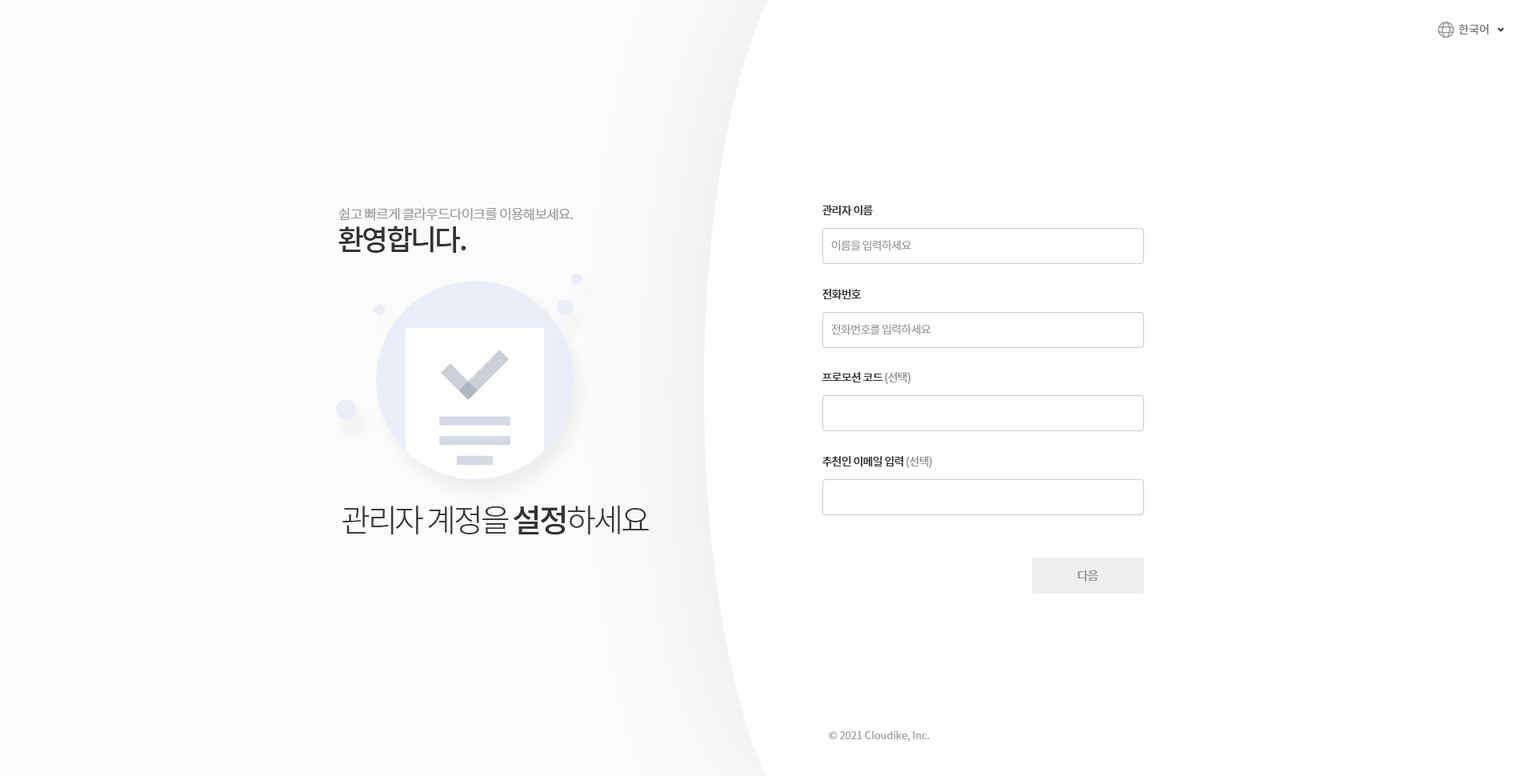
<style>
.page{position:relative;width:1536px;height:776px;background:#ffffff}
.page>*{position:absolute;margin:0}
.t1{font:11.2px "NotoSansCJKkr-DemiLight";color:#666666}
.t2{font:13.6px "NotoSansCJKkr-DemiLight";letter-spacing:-0.05em;color:#999999}
.t3{font:11.2px "NotoSansCJKkr-Medium";letter-spacing:-0.05em;color:#333333}
.t4{font:28.8px "NotoSansCJKkr-Medium";letter-spacing:-0.075em;color:#333333}
.t5{font:11.2px "NotoSansCJKkr-DemiLight";letter-spacing:-0.05em;color:#999999}
.t6{font:11.2px "NotoSansCJKkr-Medium";letter-spacing:-0.05em;color:#999999}
.t7{font:32px "NotoSansCJKkr-Light";letter-spacing:-0.075em;color:#333333}
.t8{font:32px "NotoSansCJKkr-Medium";letter-spacing:-0.075em;color:#333333}
.t9{font:12px "NotoSansCJKkr-Medium";letter-spacing:-0.05em;color:#999999}
.t10{font:10.4px "NotoSansCJKkr-DemiLight";color:#999999}
</style>
<div class="page">
<p class="t1" style="left:1459px;top:24px;width:30px;height:11px">한국어</p>
<p class="t2" style="left:338px;top:207px;width:236px;height:14px">쉽고 빠르게 클라우드다이크를 이용해보세요.</p>
<p class="t3" style="left:823px;top:205px;width:50px;height:11px">관리자 이름</p>
<p class="t4" style="left:338px;top:226px;width:128px;height:27px">환영합니다.</p>
<p class="t5" style="left:831px;top:240px;width:80px;height:11px">이름을 입력하세요</p>
<p class="t3" style="left:823px;top:289px;width:39px;height:11px">전화번호</p>
<p class="t5" style="left:831px;top:324px;width:100px;height:11px">전화번호를 입력하세요</p>
<p class="t3" style="left:823px;top:372px;width:88px;height:12px">프로모션 코드 <span class="t6">(선택)</span></p>
<p class="t3" style="left:823px;top:456px;width:109px;height:12px">추천인 이메일 입력 <span class="t6">(선택)</span></p>
<p class="t7" style="left:342px;top:506px;width:307px;height:29px">관리자 계정을 <span class="t8">설정</span>하세요</p>
<p class="t9" style="left:1078px;top:570px;width:21px;height:12px">다음</p>
<p class="t9" style="left:1078px;top:570px;width:21px;height:12px">다음</p>
<p class="t10" style="left:829px;top:731px;width:101px;height:11px">© 2021 Cloudike, Inc.</p>
</div>
